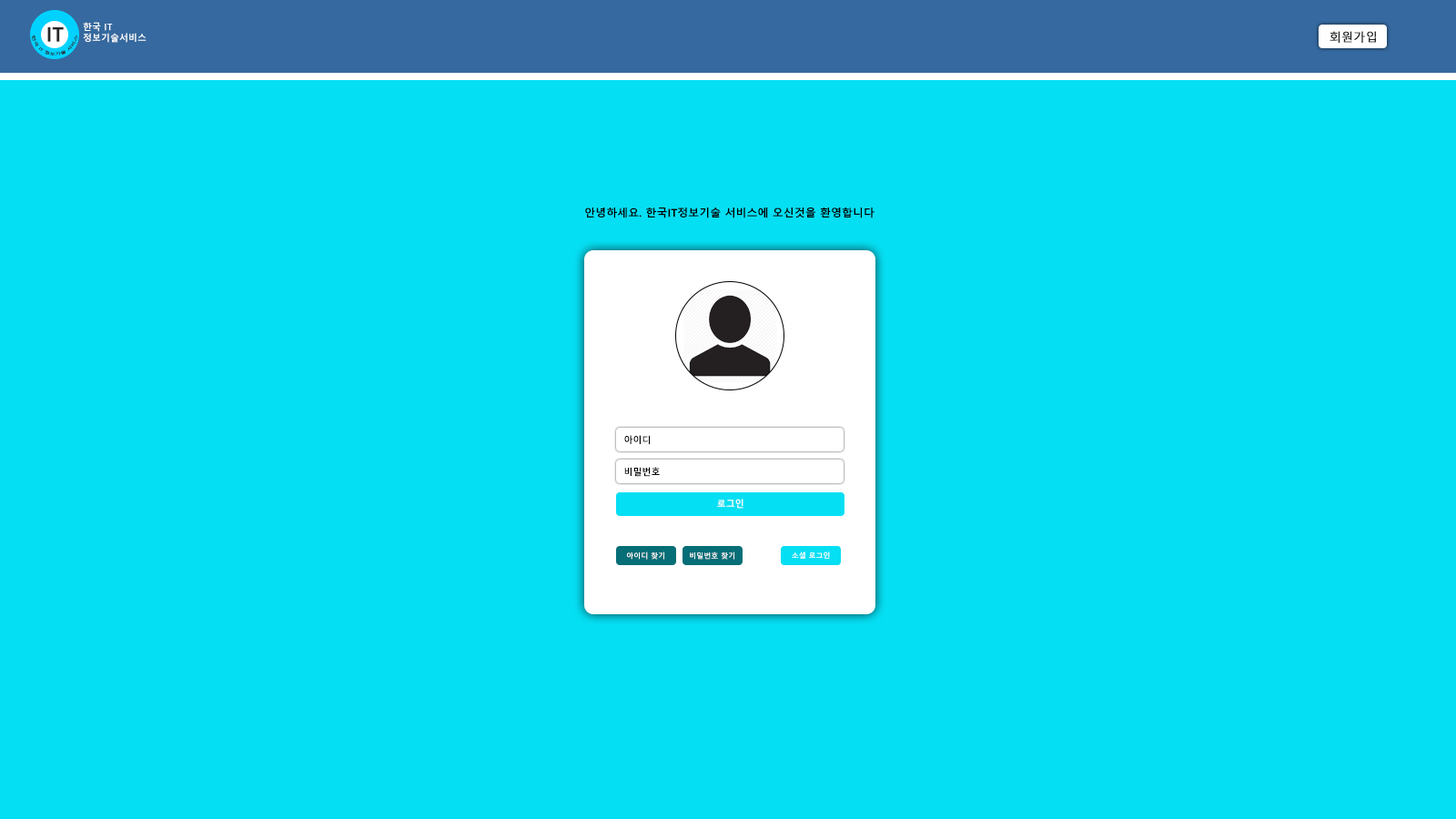
<style>
.page{position:relative;width:1456px;height:819px;background:#05dff3}
.page>*{position:absolute;margin:0}
.t1{font:20px "MalgunGothicBold";color:#282828}
.t2{font:9.1px "MalgunGothicBold";color:#ffffff}
.t3{font:3.6px "MalgunGothic";color:#282828}
.t4{font:11.8px "MalgunGothic";color:#282828;font-weight:bold}
.t5{font:10.9px "MalgunGothicBold";color:#000000}
.t6{font:9.1px "MalgunGothicBold";color:#000000}
.t7{font:7.3px "MalgunGothicBold";color:#ffffff}
</style>
<div class="page">
<p class="t1" style="left:47px;top:27px;width:17px;height:15px">IT</p>
<p class="t2" style="left:83px;top:22px;width:64px;height:21px">한국 IT<br>정보기술서비스</p>
<p class="t3" style="left:31px;top:35px;width:47px;height:21px;text-align:center">한국 IT 정보기술 서비스</p>
<p class="t4" style="left:1329px;top:31px;width:47px;height:12px">회원가입</p>
<p class="t5" style="left:585px;top:207px;width:289px;height:11px">안녕하세요. 한국IT정보기술 서비스에 오신것을 환영합니다</p>
<p class="t6" style="left:624px;top:435px;width:26px;height:10px">아이디</p>
<p class="t6" style="left:624px;top:467px;width:36px;height:10px">비밀번호</p>
<p class="t2" style="left:717px;top:499px;width:26px;height:10px">로그인</p>
<p class="t7" style="left:627px;top:551px;width:37px;height:9px">아이디 찾기</p>
<p class="t7" style="left:690px;top:551px;width:44px;height:9px">비밀번호 찾기</p>
<p class="t7" style="left:792px;top:551px;width:38px;height:8px">소셜 로그인</p>
</div>
